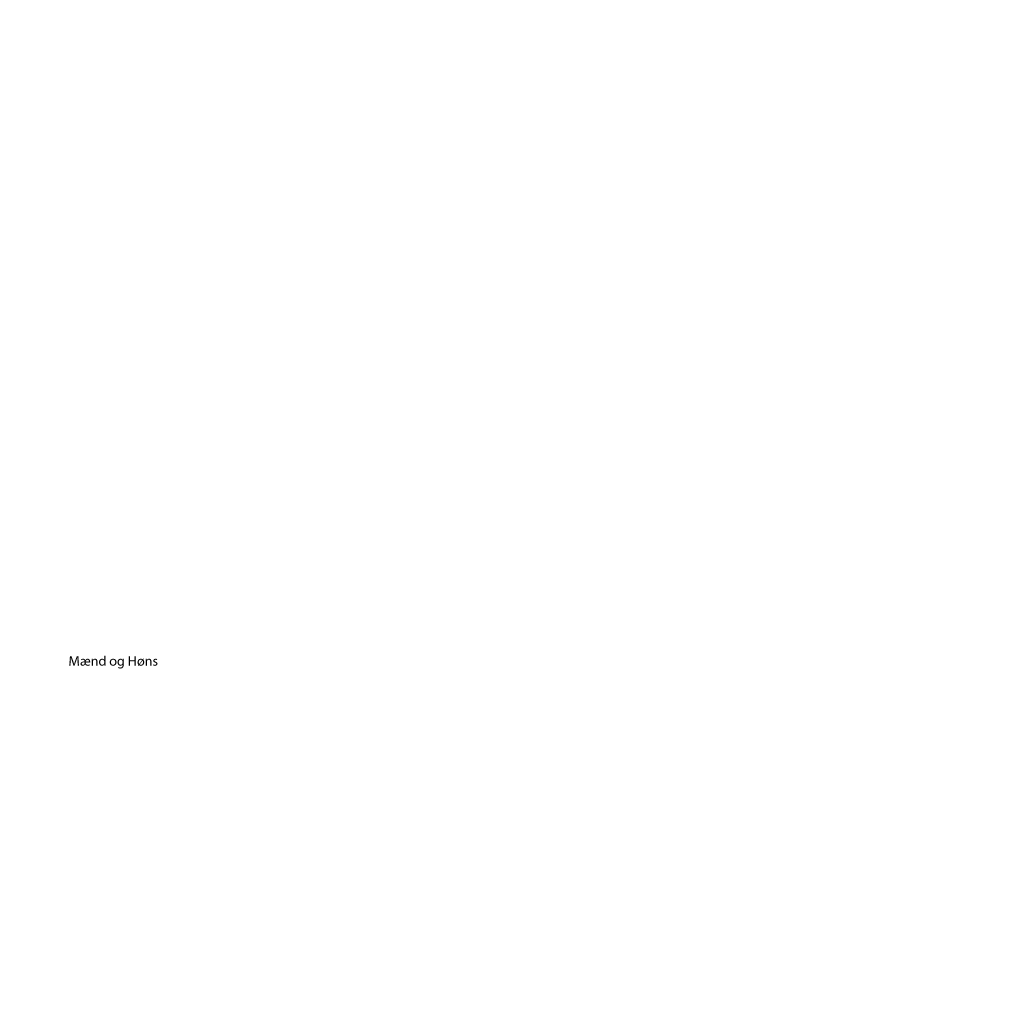
<style>
.page{position:relative;width:1020px;height:1020px;background:#ffffff}
.page>*{position:absolute;margin:0}
.t1{font:14px "MyriadPro-Regular";color:#000000}
</style>
<div class="page">
<p class="t1" style="left:69px;top:655px;width:89px;height:14px">Mænd og Høns</p>
</div>
